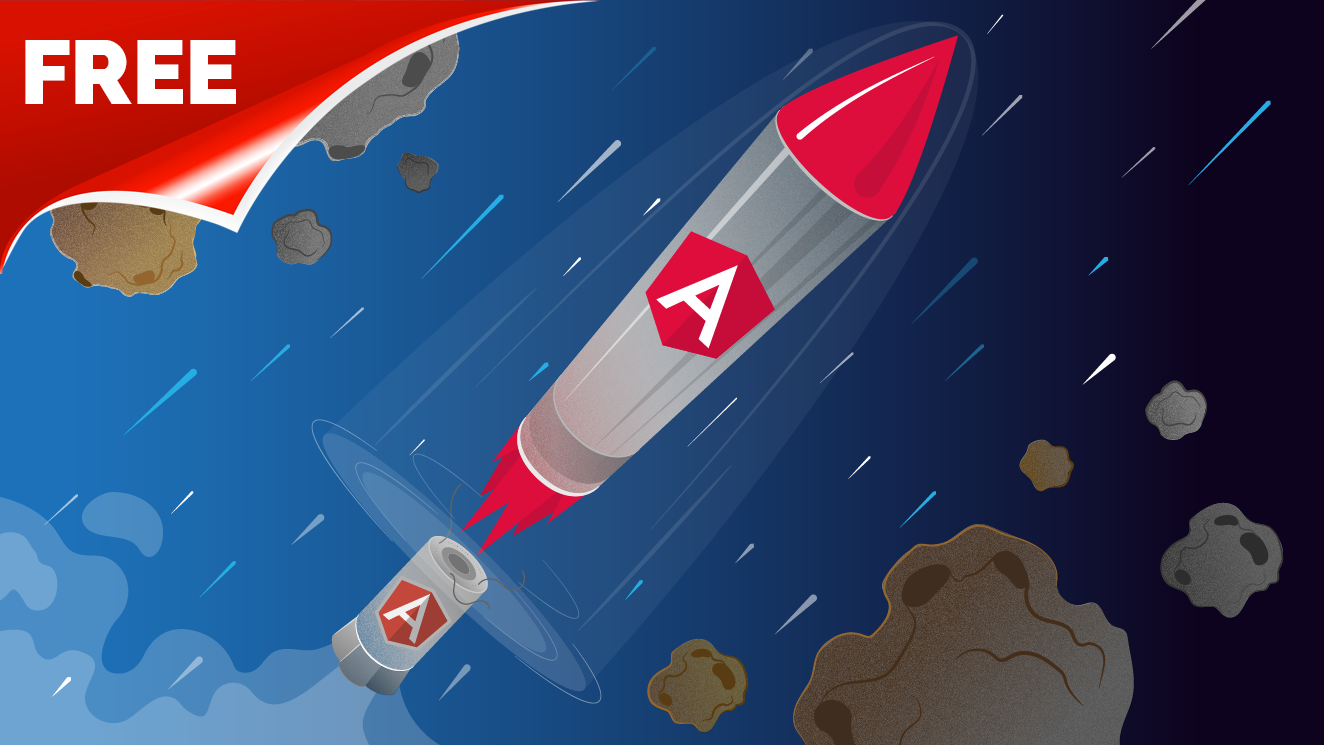
<style>
.page{position:relative;width:1324px;height:745px}
.page>*{position:absolute;margin:0}
.t1{font:90px "Raleway-Heavy";color:#ffffff}
</style>
<div class="page">
<p class="t1" style="left:25px;top:40px;width:211px;height:64px">FREE</p>
</div>
